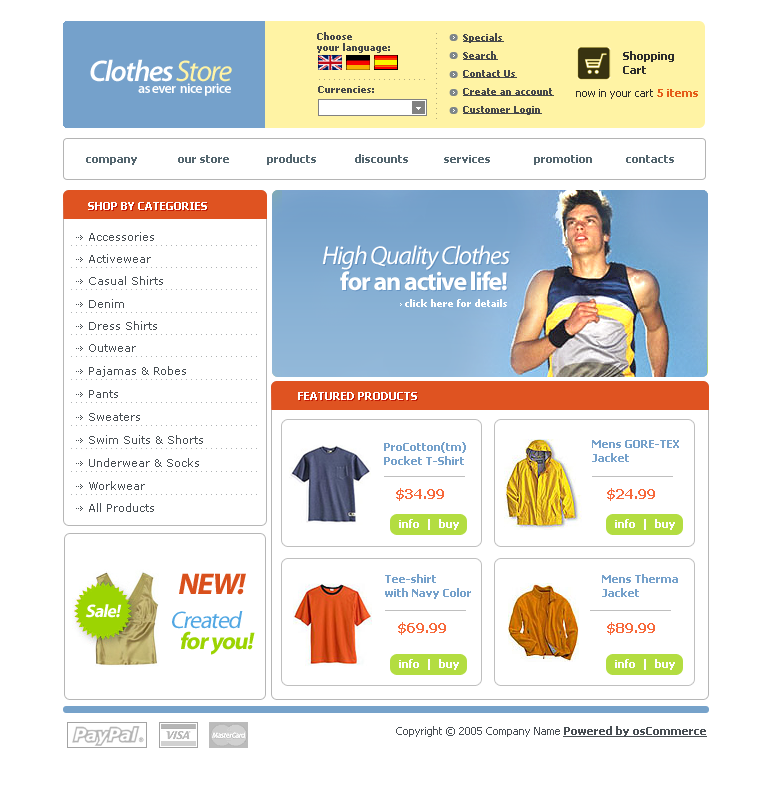
<style>
.page{position:relative;width:766px;height:790px;background:#ffffff}
.page>*{position:absolute;margin:0}
.t1{font:10px/11px "Tahoma-Bold";color:#46484a}
.t2{font:10px/18px "Tahoma-Bold";color:#46484a;text-decoration:underline}
.t3{font:11px/14px "Tahoma-Bold";color:#2c2c2c}
.t4{font:30px "MyriadPro-SemiboldIt";letter-spacing:-0.05em;color:#ffffff}
.t5{font:30px "MyriadPro-It";letter-spacing:-0.05em;color:#fff3a5}
.t6{font:14px "MyriadPro-Semibold";letter-spacing:-0.05em;color:#ffffff}
.t7{font:10px "Tahoma-Bold";color:#46484a}
.t8{font:11px "Tahoma";color:#2c2c2c}
.t9{font:11px "Tahoma-Bold";color:#e55c19}
.t10{font:11px "Tahoma-Bold";color:#54666f}
.t11{font:11px "Tahoma-Bold";color:#ffffff;text-transform:uppercase}
.t12{font:11px "Verdana";color:#484e53}
.t13{font:26px "MyriadPro-It";letter-spacing:-0.05em;color:#ffffff}
.t14{font:26px "MyriadPro-It";letter-spacing:-0.05em;color:#ffffff;text-transform:uppercase}
.t15{font:26px "MyriadPro-Bold";letter-spacing:-0.05em;color:#ffffff}
.t16{font:10px "Tahoma-Bold";color:#ffffff}
.t17{font:11px/14px "Tahoma-Bold";color:#75a1cb}
.t18{font:14px "Tahoma-Bold";color:#f7683a}
.t19{font:11px "Tahoma-Bold";color:#ffffff}
.t20{font:30px "MyriadPro-Bold";letter-spacing:-0.05em;color:#d9501c;font-style:italic}
.t21{font:18px "MyriadPro-Bold";letter-spacing:-0.05em;color:#ffffff;font-style:italic}
.t22{font:18px "MyriadPro-Bold";letter-spacing:-0.05em;color:#ffffff;text-transform:uppercase;font-style:italic}
.t23{font:24px "MyriadPro-Regular";letter-spacing:-0.05em;color:#51a7e3;font-style:italic}
.t24{font:24px "MyriadPro-Bold";letter-spacing:-0.05em;color:#9cd402;font-style:italic}
.t25{font:11px "Tahoma";color:#484e53}
.t26{font:11px "Tahoma-Bold";color:#484e53;text-decoration:underline}
</style>
<div class="page">
<p class="t1" style="left:317px;top:32px;width:73px;height:21px">Choose<br>your language:</p>
<p class="t2" style="left:463px;top:33px;width:91px;height:82px">Specials<br>Search<br>Contact Us<br>Create an account<br>Customer Login</p>
<p class="t3" style="left:623px;top:51px;width:51px;height:23px">Shopping<br>Cart</p>
<p class="t4" style="left:90px;top:59px;width:142px;height:23px">Clothes <span class="t5">Store</span></p>
<p class="t6" style="left:138px;top:83px;width:93px;height:13px">as ever  nice price</p>
<p class="t7" style="left:318px;top:86px;width:56px;height:7px">Currencies:</p>
<p class="t8" style="left:576px;top:89px;width:122px;height:10px">now in your cart <span class="t9">5 items</span></p>
<p class="t10" style="left:86px;top:157px;width:51px;height:8px">company</p>
<p class="t10" style="left:178px;top:155px;width:51px;height:8px">our store</p>
<p class="t10" style="left:267px;top:154px;width:49px;height:11px">products</p>
<p class="t10" style="left:355px;top:154px;width:53px;height:9px">discounts</p>
<p class="t10" style="left:444px;top:155px;width:46px;height:8px">services</p>
<p class="t10" style="left:534px;top:155px;width:58px;height:10px">promotion</p>
<p class="t10" style="left:626px;top:155px;width:48px;height:8px">contacts</p>
<p class="t11" style="left:88px;top:202px;width:119px;height:8px">shop by categories</p>
<p class="t12" style="left:89px;top:232px;width:65px;height:9px">Accessories</p>
<p class="t13" style="left:322px;top:245px;width:188px;height:25px"><span class="t14">H</span>igh Quality Clothes</p>
<p class="t12" style="left:89px;top:254px;width:62px;height:9px">Activewear</p>
<p class="t12" style="left:89px;top:276px;width:74px;height:9px">Casual Shirts</p>
<p class="t15" style="left:340px;top:271px;width:167px;height:20px">for an active life!</p>
<p class="t12" style="left:89px;top:299px;width:35px;height:9px">Denim</p>
<p class="t16" style="left:405px;top:299px;width:102px;height:8px">click here for details</p>
<p class="t12" style="left:89px;top:321px;width:68px;height:9px">Dress Shirts</p>
<p class="t12" style="left:89px;top:344px;width:47px;height:8px">Outwear</p>
<p class="t12" style="left:89px;top:366px;width:97px;height:11px">Pajamas &amp; Robes</p>
<p class="t12" style="left:89px;top:390px;width:29px;height:8px">Pants</p>
<p class="t11" style="left:298px;top:392px;width:119px;height:8px">featured products</p>
<p class="t12" style="left:89px;top:413px;width:51px;height:8px">Sweaters</p>
<p class="t12" style="left:89px;top:435px;width:114px;height:9px">Swim Suits &amp; Shorts</p>
<p class="t17" style="left:384px;top:442px;width:82px;height:23px">ProCotton(tm) <br>Pocket T-Shirt</p>
<p class="t17" style="left:592px;top:440px;width:87px;height:22px">Mens GORE-TEX <br>Jacket</p>
<p class="t12" style="left:89px;top:458px;width:110px;height:9px">Underwear &amp; Socks</p>
<p class="t12" style="left:89px;top:481px;width:56px;height:9px">Workwear</p>
<p class="t18" style="left:396px;top:488px;width:48px;height:13px">$34.99</p>
<p class="t18" style="left:607px;top:488px;width:48px;height:13px">$24.99</p>
<p class="t12" style="left:89px;top:503px;width:65px;height:9px">All Products</p>
<p class="t19" style="left:399px;top:519px;width:60px;height:11px">info  |  buy</p>
<p class="t19" style="left:615px;top:519px;width:60px;height:11px">info  |  buy</p>
<p class="t20" style="left:179px;top:573px;width:67px;height:22px">NEW!</p>
<p class="t17" style="left:385px;top:574px;width:86px;height:25px">Tee-shirt <br>with Navy Color</p>
<p class="t17" style="left:602px;top:574px;width:76px;height:23px">Mens Therma <br>Jacket</p>
<p class="t21" style="left:85px;top:604px;width:37px;height:14px"><span class="t22">s</span>ale!</p>
<p class="t23" style="left:172px;top:611px;width:71px;height:18px">Created</p>
<p class="t18" style="left:398px;top:622px;width:48px;height:13px">$69.99</p>
<p class="t18" style="left:607px;top:622px;width:48px;height:13px">$89.99</p>
<p class="t24" style="left:181px;top:631px;width:74px;height:24px">for you!</p>
<p class="t19" style="left:399px;top:659px;width:60px;height:11px">info  |  buy</p>
<p class="t19" style="left:615px;top:659px;width:60px;height:11px">info  |  buy</p>
<p class="t25" style="left:396px;top:726px;width:311px;height:11px">Copyright © 2005 Company Name <span class="t26">Powered by osCommerce</span></p>
</div>
